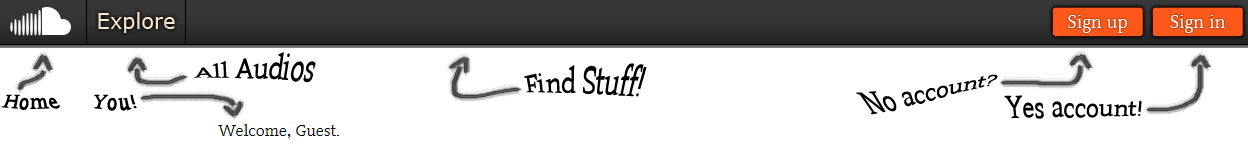
<style>
.page{position:relative;width:1248px;height:149px;background:#ffffff}
.page>*{position:absolute;margin:0}
.t1{font:24px "Contra";color:#000000}
.t2{font:18.7px "Contra";color:#000000}
</style>
<div class="page">
<p class="t1" style="left:194px;top:52px;width:122px;height:31px">All Audios</p>
<p class="t1" style="left:524px;top:63px;width:123px;height:34px">Find Stuff!</p>
<p class="t1" style="left:856px;top:74px;width:142px;height:41px;text-align:center">No account?</p>
<p class="t2" style="left:1px;top:94px;width:59px;height:16px">Home</p>
<p class="t2" style="left:94px;top:94px;width:43px;height:17px">You!</p>
<p class="t1" style="left:1004px;top:95px;width:138px;height:24px">Yes account!</p>
</div>
